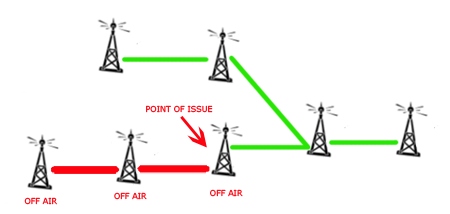
<style>
.page{position:relative;width:450px;height:214px;background:#ffffff}
.page>*{position:absolute;margin:0}
.t1{font:8px "Verdana";color:#fc030f}
</style>
<div class="page">
<p class="t1" style="left:146px;top:105px;width:67px;height:8px">POINT OF ISSUE</p>
<p class="t1" style="left:24px;top:197px;width:33px;height:8px">OFF AIR</p>
<p class="t1" style="left:114px;top:192px;width:33px;height:8px">OFF AIR</p>
<p class="t1" style="left:210px;top:189px;width:33px;height:8px">OFF AIR</p>
</div>
